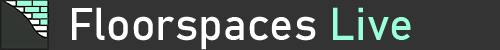
<style>
.page{position:relative;width:500px;height:50px;background:#333333}
.page>*{position:absolute;margin:0}
.t1{font:45.3px "Bahnschrift";color:#ffffff}
.t2{font:45.3px "Bahnschrift";color:#9bffda}
</style>
<div class="page">
<p class="t1" style="left:72px;top:7px;width:339px;height:43px">Floorspaces <span class="t2">Live</span></p>
</div>
